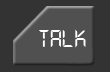
<style>
.page{position:relative;width:110px;height:72px;background:#333333}
.page>*{position:absolute;margin:0}
.t1{font:26px "DS-Digital";letter-spacing:-0.025em;color:#ffffff}
</style>
<div class="page">
<p class="t1" style="left:39px;top:29px;width:47px;height:19px">TALK</p>
</div>
